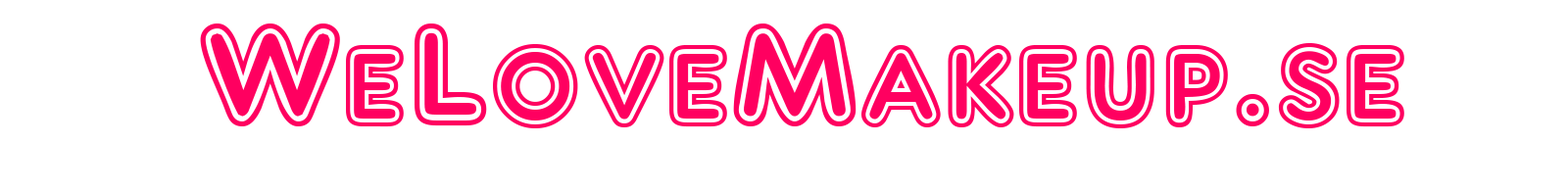
<style>
.page{position:relative;width:1568px;height:192px;background:#ffffff}
.page>*{position:absolute;margin:0}
.t1{font:151.9px "ARDELANEY";color:#ff0060}
</style>
<div class="page">
<p class="t1" style="left:200px;top:24px;width:1204px;height:104px">WeLoveMakeup.se</p>
</div>
